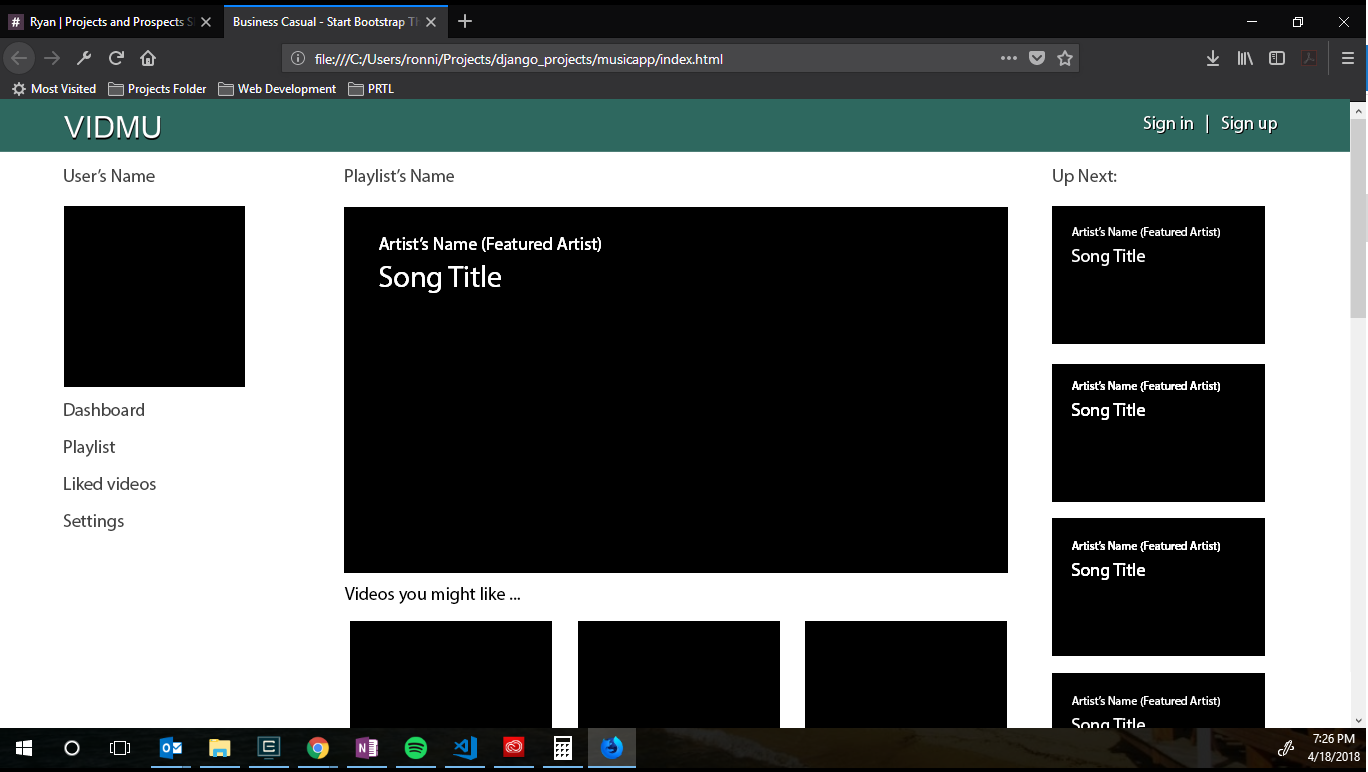
<style>
.page{position:relative;width:1368px;height:772px;background:#000000}
.page>*{position:absolute;margin:0}
.t1{font:18px "MyriadPro-Regular";color:#444444}
.t2{font:12px/26.1px "MyriadPro-Regular";color:#ffffff}
.t3{font:18px/26.1px "MyriadPro-Regular";color:#ffffff}
.t4{font:18px/37px "MyriadPro-Regular";color:#ffffff}
.t5{font:30px/37px "MyriadPro-Regular";color:#ffffff}
.t6{font:18px/37px "MyriadPro-Regular";color:#444444}
.t7{font:18px "MyriadPro-Regular";color:#000000}
</style>
<div class="page">
<p class="t1" style="left:64px;top:169px;width:91px;height:13px">User’s Name</p>
<p class="t1" style="left:345px;top:169px;width:109px;height:17px">Playlist’s Name</p>
<p class="t1" style="left:1053px;top:169px;width:64px;height:17px">Up Next:</p>
<p class="t2" style="left:1072px;top:227px;width:148px;height:39px">Artist’s Name (Featured Artist)<br><span class="t3">Song Title</span></p>
<p class="t4" style="left:379px;top:237px;width:222px;height:56px">Artist’s Name (Featured Artist)<br><span class="t5">Song Title</span></p>
<p class="t4" style="left:379px;top:237px;width:222px;height:56px">Artist’s Name (Featured Artist)<br><span class="t5">Song Title</span></p>
<p class="t2" style="left:1072px;top:381px;width:148px;height:39px">Artist’s Name (Featured Artist)<br><span class="t3">Song Title</span></p>
<p class="t2" style="left:1072px;top:381px;width:148px;height:39px">Artist’s Name (Featured Artist)<br><span class="t3">Song Title</span></p>
<p class="t2" style="left:1072px;top:381px;width:148px;height:39px">Artist’s Name (Featured Artist)<br><span class="t3">Song Title</span></p>
<p class="t6" style="left:63px;top:403px;width:93px;height:128px"><span class="t1">Dashboard<br></span>Playlist<br>Liked videos<br>Settings</p>
<p class="t2" style="left:1072px;top:541px;width:148px;height:39px">Artist’s Name (Featured Artist)<br><span class="t3">Song Title</span></p>
<p class="t2" style="left:1072px;top:541px;width:148px;height:39px">Artist’s Name (Featured Artist)<br><span class="t3">Song Title</span></p>
<p class="t2" style="left:1072px;top:541px;width:148px;height:39px">Artist’s Name (Featured Artist)<br><span class="t3">Song Title</span></p>
<p class="t7" style="left:344px;top:587px;width:176px;height:17px">Videos you might like ...</p>
<p class="t2" style="left:1072px;top:696px;width:148px;height:39px">Artist’s Name (Featured Artist)<br><span class="t3">Song Title</span></p>
</div>
